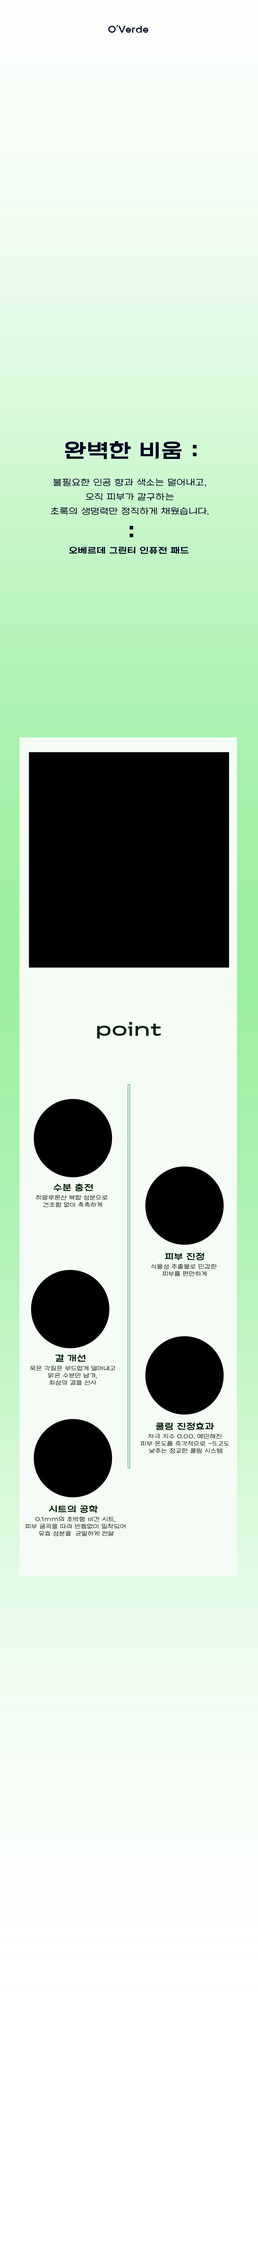
<style>
.page{position:relative;width:258px;height:2245px}
.page>*{position:absolute;margin:0}
.t1{font:9px "ExpoM-HM";letter-spacing:0.05em;color:#030723}
.t2{font:9px/14.4px "YdestreetL";letter-spacing:0.05em;color:#030723}
.t3{font:21.6px "YdestreetB";letter-spacing:0.05em;color:#030723}
.t4{font:9px "YdestreetB";letter-spacing:0.05em;color:#030723}
.t5{font:18px "YdestreetB";letter-spacing:0.05em;color:#022303}
.t6{font:9px "YdestreetB";letter-spacing:0.05em;color:#022303}
.t7{font:6px/7.2px "YdestreetL";letter-spacing:0.05em;color:#022303}
</style>
<div class="page">
<p class="t1" style="left:108px;top:25px;width:40px;height:8px">O'Verde</p>
<p class="t2" style="left:51px;top:441px;width:157px;height:96px;text-align:center"><span class="t3">완벽한 비움 :<br></span>불필요한 인공 향과 색소는 덜어내고, <br>오직 피부가 갈구하는 <br>초록의 생명력만 정직하게 채웠습니다. <br><span class="t3">:</span></p>
<p class="t4" style="left:69px;top:547px;width:120px;height:7px">오베르데 그린티 인퓨전 패드</p>
<p class="t5" style="left:97px;top:1022px;width:64px;height:17px">point</p>
<p class="t6" style="left:54px;top:1184px;width:39px;height:8px">수분 충전</p>
<p class="t7" style="left:36px;top:1195px;width:72px;height:13px;text-align:center">히알루론산 복합 성분으로 <br>건조함 없이 촉촉하게</p>
<p class="t6" style="left:165px;top:1253px;width:39px;height:8px">피부 진정</p>
<p class="t7" style="left:151px;top:1264px;width:66px;height:12px;text-align:center">식물성 추출물로 민감한 <br>피부를 편안하게</p>
<p class="t6" style="left:55px;top:1354px;width:31px;height:8px">결 개선</p>
<p class="t7" style="left:30px;top:1366px;width:86px;height:19px;text-align:center">묵은 각질은 부드럽게 덜어내고<br>맑은 수분만 남겨,<br>최상의 결을 선사</p>
<p class="t7" style="left:140px;top:1434px;width:90px;height:20px;text-align:center">자극 지수 0.00. 예민해진 <br>피부 온도를 즉각적으로 -5.2도 <br>낮추는 정교한 쿨링 시스템</p>
<p class="t6" style="left:156px;top:1423px;width:58px;height:7px">쿨링 진정효과</p>
<p class="t6" style="left:49px;top:1505px;width:49px;height:8px">시트의 공학</p>
<p class="t7" style="left:25px;top:1516px;width:100px;height:20px;text-align:center">0.1mm의 초박형 비건 시트, <br>피부 굴곡을 따라 빈틈없이 밀착되어 <br>유효 성분을  균일하게 전달</p>
</div>
